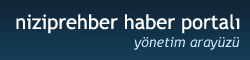
<style>
.page{position:relative;width:250px;height:60px}
.page>*{position:absolute;margin:0}
.t1{font:20px "TrebuchetMS";color:#ffffff}
.t2{font:14px "TrebuchetMS-Italic";color:#cfe8f7}
</style>
<div class="page">
<p class="t1" style="left:16px;top:14px;width:224px;height:20px">niziprehber haber portalı</p>
<p class="t2" style="left:134px;top:37px;width:106px;height:13px">yönetim arayüzü</p>
</div>
